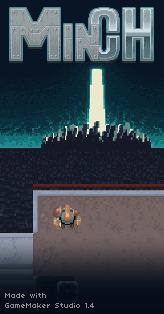
<style>
.page{position:relative;width:164px;height:314px}
.page>*{position:absolute;margin:0}
.t1{font:8px "04b03";color:#8d8e91}
</style>
<div class="page">
<p class="t1" style="left:5px;top:293px;width:89px;height:15px">Made with<br>GameMaker Studio 1.4</p>
</div>
